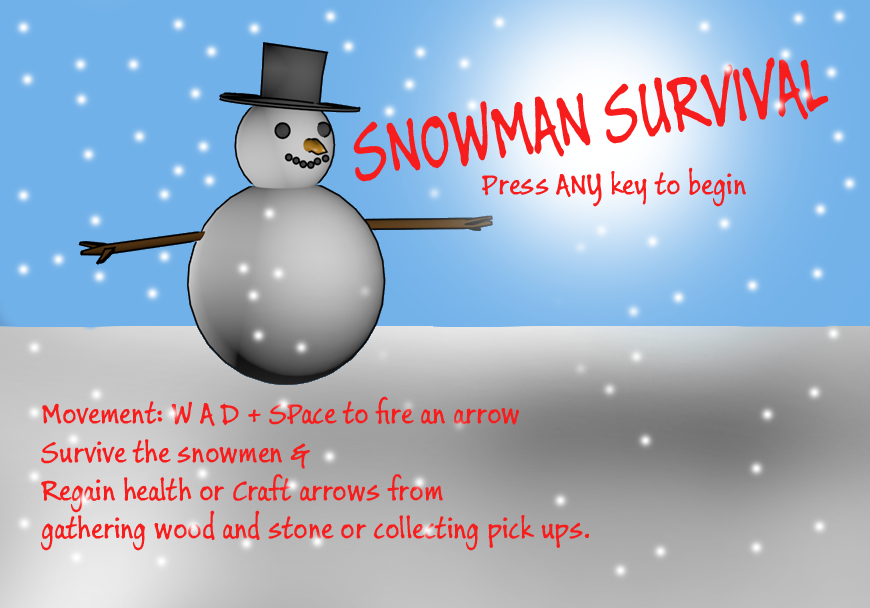
<style>
.page{position:relative;width:870px;height:608px}
.page>*{position:absolute;margin:0}
.t1{font:86.7px "BuxtonSketch";color:#f71d1d;scale:0.72 1}
.t2{font:32px "BuxtonSketch";color:#f71d1d}
</style>
<div class="page">
<p class="t1" style="left:353px;top:57px;width:476px;height:125px;rotate:-9deg">SNOWMAN SURVIVAL</p>
<p class="t2" style="left:482px;top:167px;width:264px;height:40px">Press ANY key to begin</p>
<p class="t2" style="left:41px;top:396px;width:548px;height:155px">Movement: W A D + SPace to fire an arrow<br>Survive the snowmen &amp;<br>Regain health or Craft arrows from <br>gathering wood and stone or collecting pick ups.</p>
</div>
